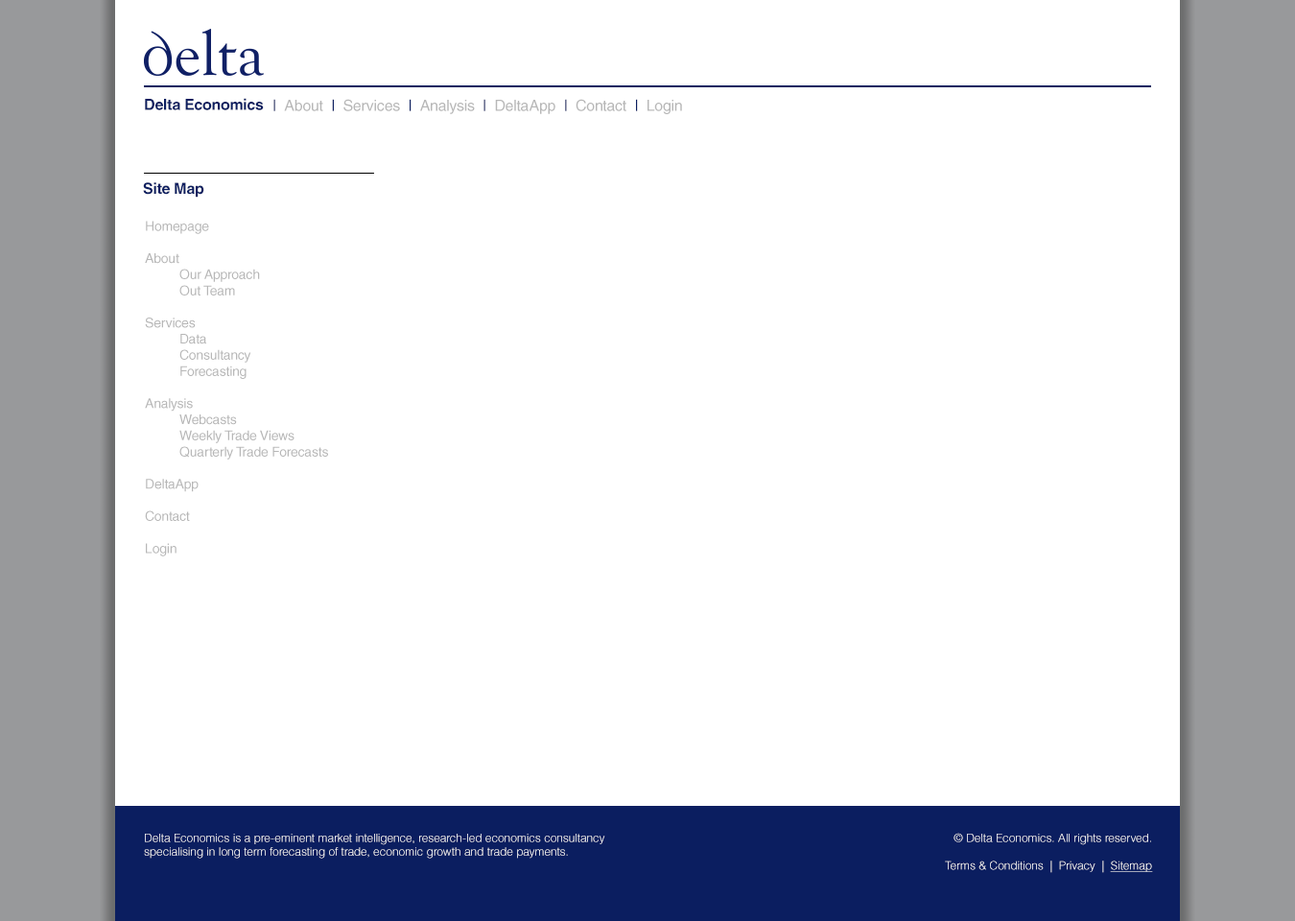
<style>
.page{position:relative;width:1295px;height:921px;background:#ffffff}
.page>*{position:absolute;margin:0}
.t1{font:15.3px "HelveticaLTStd-Bold";letter-spacing:-0.015em;color:#0b1e60}
.t2{font:15.3px "HelveticaLTStd-Roman";letter-spacing:-0.015em;color:#b7b7b7}
.t3{font:15.3px "HelveticaLTStd-Roman";letter-spacing:-0.015em;color:#0b1e60}
.t4{font:13.4px "HelveticaLTStd-Roman";letter-spacing:-0.015em;color:#b7b7b7}
.t5{font:11.5px "HelveticaLTStd-Light";color:#ffffff}
.t6{font:11.5px "HelveticaLTStd-Light";color:#ffffff;text-decoration:underline}
</style>
<div class="page">
<p class="t1" style="left:145px;top:98px;width:119px;height:12px">Delta Economics</p>
<p class="t2" style="left:273px;top:99px;width:409px;height:15px"><span class="t3">|  </span>About  <span class="t3">|  </span>Services  <span class="t3">|  </span>Analysis  <span class="t3">|  </span>DeltaApp  <span class="t3">|  </span>Contact  <span class="t3">|  </span>Login</p>
<p class="t1" style="left:143px;top:182px;width:61px;height:16px">Site Map</p>
<p class="t4" style="left:145px;top:221px;width:183px;height:335px">Homepage<br><br>About<br> Our Approach<br> Out Team<br><br>Services<br> Data<br> Consultancy<br> Forecasting<br><br>Analysis<br> Webcasts<br> Weekly Trade Views<br> Quarterly Trade Forecasts<br><br>DeltaApp<br><br>Contact<br><br>Login</p>
<p class="t5" style="left:144px;top:834px;width:461px;height:24px">Delta Economics is a pre-eminent market intelligence, research-led economics consultancy<br>specialising in long term forecasting of trade, economic growth and trade payments.</p>
<p class="t5" style="left:945px;top:833px;width:208px;height:40px;text-align:right">© Delta Economics. All rights reserved.<br><br>Terms &amp; Conditions  |  Privacy  |  <span class="t6">Sitemap</span></p>
</div>
